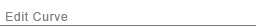
<style>
.page{position:relative;width:256px;height:26px;background:#ffffff}
.page>*{position:absolute;margin:0}
.t1{font:12.4px "ArialMT";letter-spacing:0.05em;color:#7f7f7f}
</style>
<div class="page">
<p class="t1" style="left:6px;top:12px;width:62px;height:9px">Edit Curve</p>
</div>
